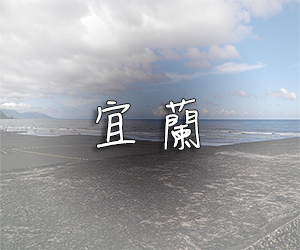
<style>
.page{position:relative;width:300px;height:250px}
.page>*{position:absolute;margin:0}
.t1{font:60.5px "DFHsiu-W3-WIN-BF";color:#ffffff;scale:1.1 1}
</style>
<div class="page">
<p class="t1" style="left:96px;top:99px;width:104px;height:51px">宜蘭</p>
</div>
